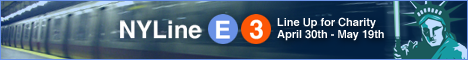
<style>
.page{position:relative;width:468px;height:60px}
.page>*{position:absolute;margin:0}
.t1{font:11px/12px "Helvetica-Bold";color:#ffffff}
</style>
<div class="page">
<p class="t1" style="left:277px;top:17px;width:107px;height:24px">Line Up for Charity<br>April 30th - May 19th</p>
</div>
